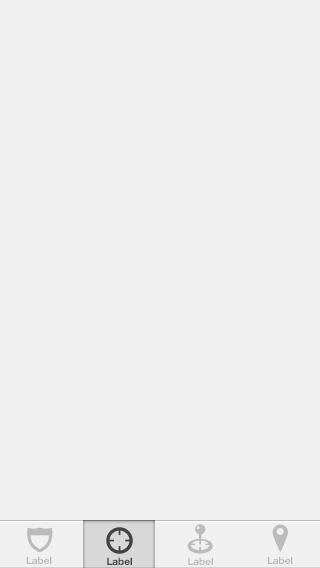
<style>
.page{position:relative;width:320px;height:568px;background:#f0f0f0}
.page>*{position:absolute;margin:0}
.t1{font:10px "HelveticaNeue-Bold";color:#bbbbbb}
.t2{font:10px "HelveticaNeue-Bold";color:#424242}
</style>
<div class="page">
<p class="t1" style="left:26px;top:556px;width:26px;height:9px">Label</p>
<p class="t2" style="left:107px;top:557px;width:25px;height:9px">Label</p>
<p class="t1" style="left:188px;top:557px;width:25px;height:9px">Label</p>
<p class="t1" style="left:267px;top:556px;width:26px;height:9px">Label</p>
</div>
